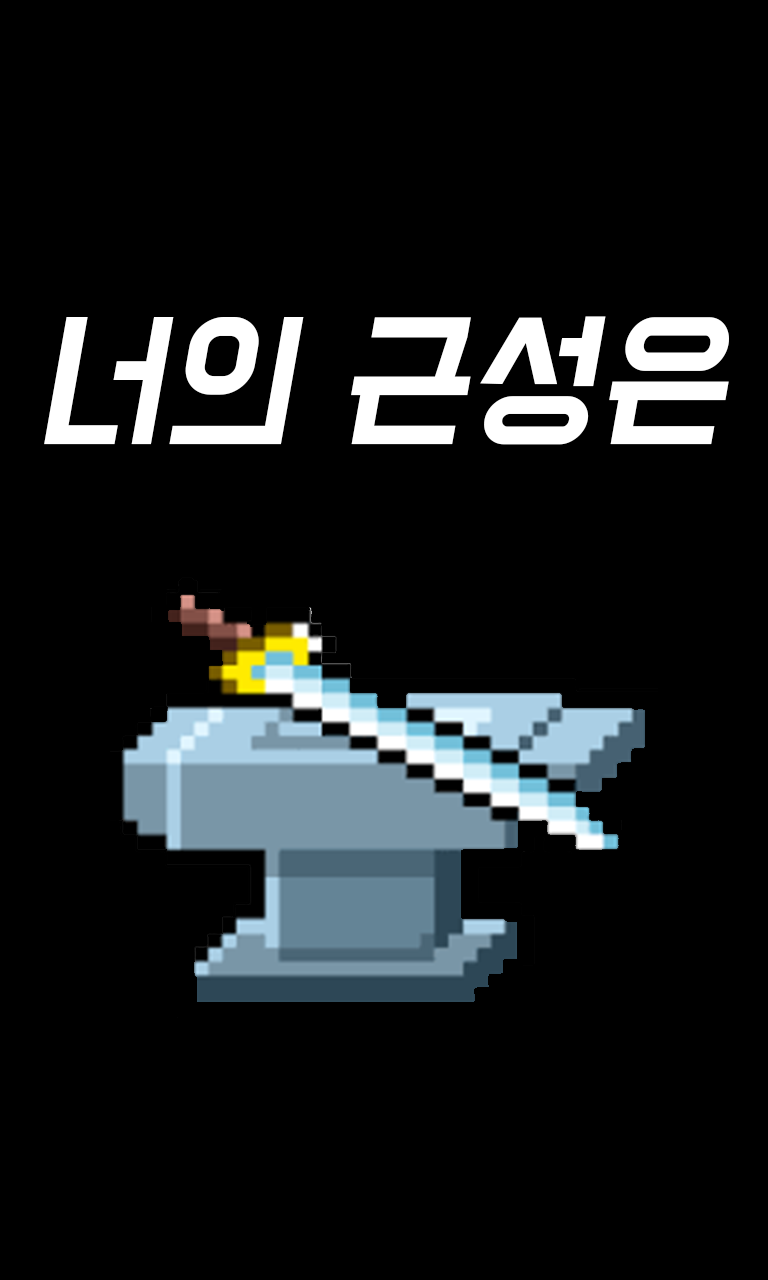
<style>
.page{position:relative;width:768px;height:1280px;background:#000000}
.page>*{position:absolute;margin:0}
.t1{font:135px "BMDoHyeon";color:#ffffff;font-style:italic}
</style>
<div class="page">
<p class="t1" style="left:44px;top:316px;width:685px;height:129px">너의 근성은</p>
</div>
